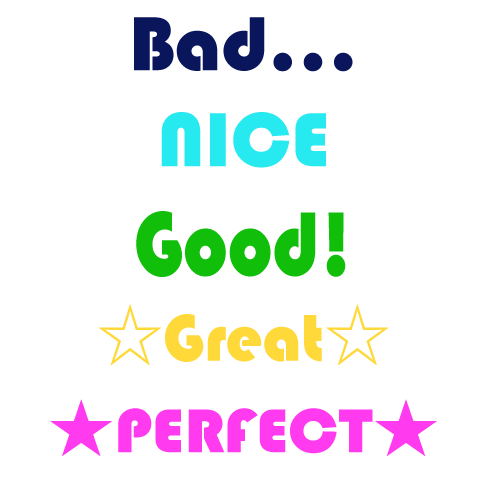
<style>
.page{position:relative;width:480px;height:480px;background:#ffffff}
.page>*{position:absolute;margin:0}
.t1{font:79.4px "Bauhaus93";color:#0a165c}
.t2{font:79.4px "Bauhaus93";color:#27e9f0}
.t3{font:94.4px "Bauhaus93";color:#11be09;scale:0.85 1}
.t4{font:68.6px "Bauhaus93";color:#ffd83a}
.t5{font:68.6px "KozGoPr6N-Regular";color:#ffd83a}
.t6{font:64.3px "Bauhaus93";color:#ff3aef;scale:1.04 1}
.t7{font:64.3px "KozGoPr6N-Regular";color:#ff3aef;scale:1.04 1}
</style>
<div class="page">
<p class="t1" style="left:134px;top:17px;width:219px;height:55px">Bad...</p>
<p class="t2" style="left:161px;top:112px;width:165px;height:56px">NICE</p>
<p class="t3" style="left:136px;top:211px;width:210px;height:66px">Good!</p>
<p class="t4" style="left:99px;top:304px;width:290px;height:62px"><span class="t5">☆</span>Great<span class="t5">☆</span></p>
<p class="t6" style="left:50px;top:399px;width:387px;height:58px"><span class="t7">★</span>PERFECT<span class="t7">★</span></p>
</div>
